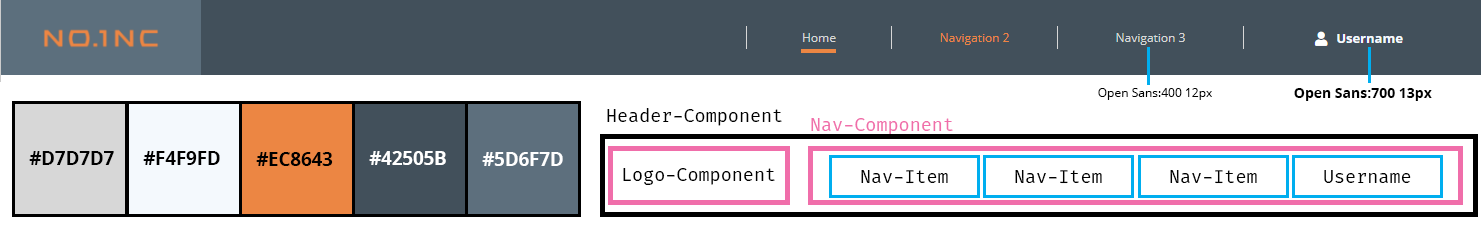
<style>
.page{position:relative;width:1481px;height:240px;background:#ffffff}
.page>*{position:absolute;margin:0}
.t1{font:12px "OpenSans";color:#000000}
.t2{font:14px "OpenSans-Bold";color:#000000}
.t3{font:18px "FiraCode-Regular";color:#000000}
.t4{font:18px "FiraCode-Regular";color:#f06eaa}
.t5{font:18.5px "OpenSans-Bold";color:#000000}
.t6{font:18.5px "OpenSans-Bold";color:#ffffff}
</style>
<div class="page">
<p class="t1" style="left:1098px;top:88px;width:114px;height:12px">Open Sans:400 12px</p>
<p class="t2" style="left:1294px;top:88px;width:138px;height:13px">Open Sans:700 13px</p>
<p class="t3" style="left:607px;top:108px;width:175px;height:18px">Header-Component</p>
<p class="t4" style="left:811px;top:118px;width:142px;height:17px">Nav-Component</p>
<p class="t5" style="left:29px;top:151px;width:85px;height:14px">#D7D7D7</p>
<p class="t5" style="left:143px;top:151px;width:77px;height:14px">#F4F9FD</p>
<p class="t5" style="left:256px;top:152px;width:77px;height:14px">#EC8643</p>
<p class="t6" style="left:369px;top:151px;width:77px;height:14px">#42505B</p>
<p class="t6" style="left:482px;top:152px;width:81px;height:14px">#5D6F7D</p>
<p class="t3" style="left:623px;top:168px;width:152px;height:17px">Logo-Component</p>
<p class="t3" style="left:861px;top:170px;width:87px;height:14px">Nav-Item</p>
<p class="t3" style="left:1015px;top:170px;width:87px;height:14px">Nav-Item</p>
<p class="t3" style="left:1170px;top:170px;width:87px;height:14px">Nav-Item</p>
<p class="t3" style="left:1324px;top:170px;width:87px;height:13px">Username</p>
</div>
